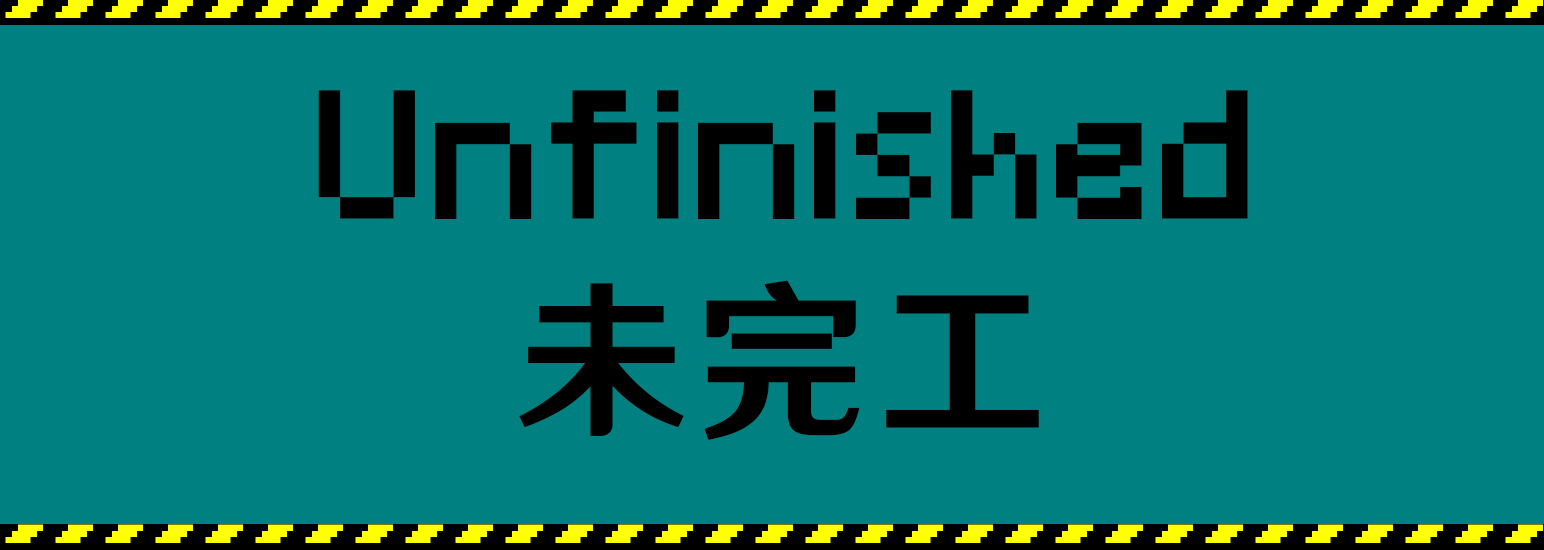
<style>
.page{position:relative;width:1544px;height:550px;background:#008080}
.page>*{position:absolute;margin:0}
.t1{font:170.7px "Minecraft";letter-spacing:0.056em;color:#000000}
.t2{font:170.7px "HYWenHei-HEW";letter-spacing:0.056em;color:#000000}
</style>
<div class="page">
<p class="t1" style="left:318px;top:90px;width:930px;height:129px">Unfinished</p>
<p class="t2" style="left:519px;top:280px;width:520px;height:160px">未完工</p>
</div>
